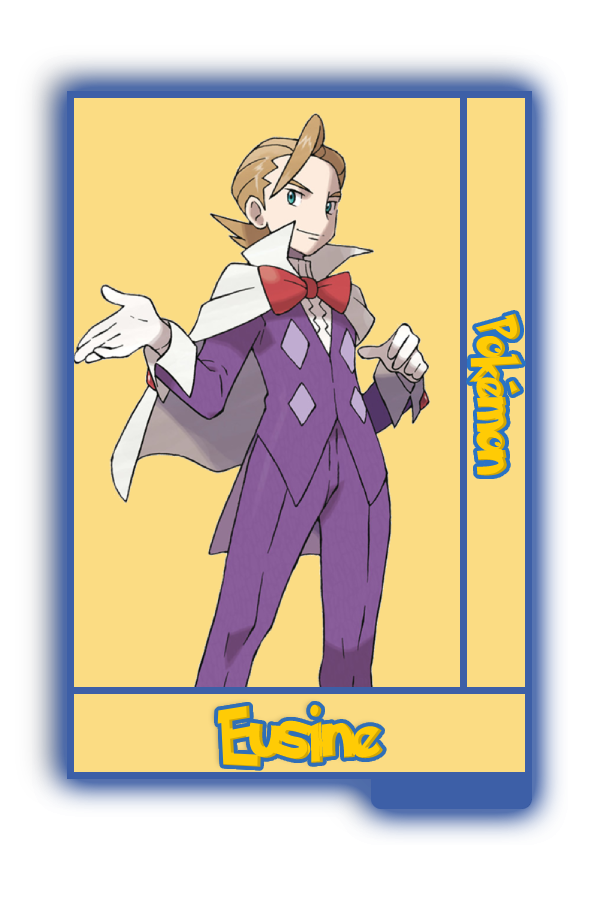
<style>
.page{position:relative;width:600px;height:900px;background:#fbdc83}
.page>*{position:absolute;margin:0}
.t1{font:48.8px "PokemonSolidNormal";color:#ffcb05;scale:0.8 1}
.t2{font:56.6px "PokemonSolidNormal";color:#ffcb05;scale:0.92 1}
</style>
<div class="page">
<p class="t1" style="left:469px;top:313px;width:54px;height:163px;rotate:90deg">Pokémon</p>
<p class="t2" style="left:217px;top:704px;width:166px;height:63px">Eusine</p>
</div>
